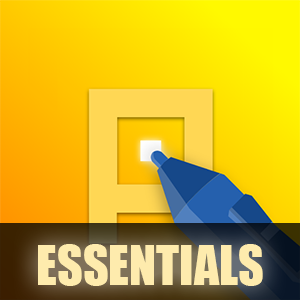
<style>
.page{position:relative;width:300px;height:300px}
.page>*{position:absolute;margin:0}
.t1{font:50px "Impact";color:#feebad}
</style>
<div class="page">
<p class="t1" style="left:38px;top:244px;width:225px;height:42px">ESSENTIALS</p>
</div>
